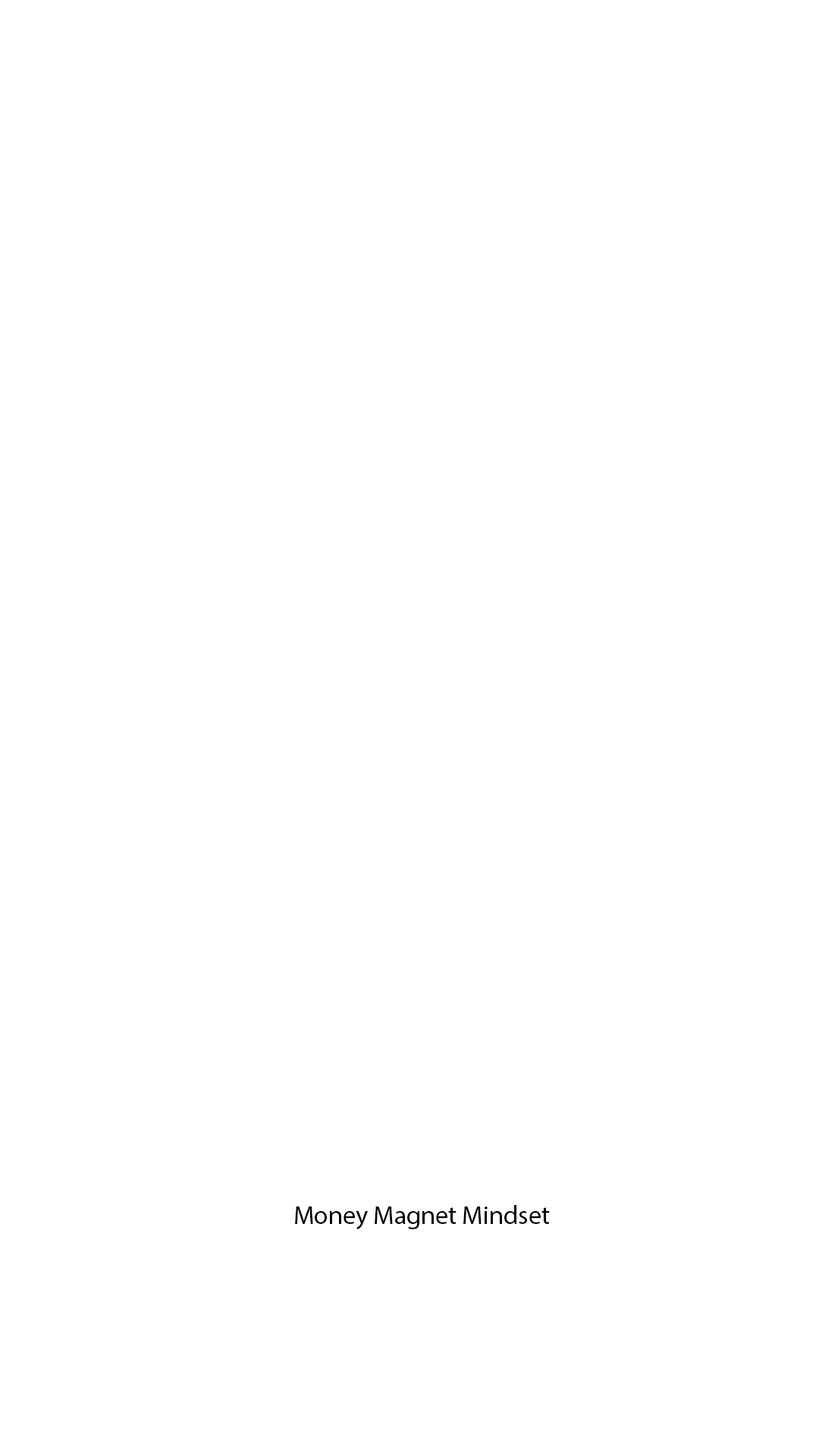
<style>
.page{position:relative;width:819px;height:1456px;background:#ffffff}
.page>*{position:absolute;margin:0}
.t1{font:25.8px "MyriadPro-Regular";color:#000000}
</style>
<div class="page">
<p class="t1" style="left:295px;top:1205px;width:255px;height:24px">Money Magnet Mindset</p>
</div>
